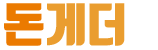
<style>
.page{position:relative;width:158px;height:50px;background:#ffffff}
.page>*{position:absolute;margin:0}
.t1{font:46px "TmonMonsoriBlack";color:#ea9d2f}
.t2{font:46px "TmonMonsoriBlack";color:#eb7a00}
</style>
<div class="page">
<p class="t1" style="left:4px;top:3px;width:121px;height:43px"><span class="t2">돈</span>게더</p>
</div>
